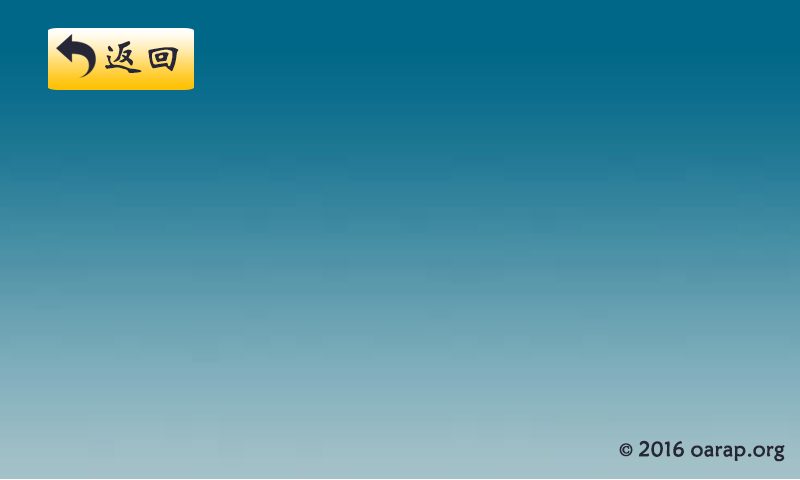
<style>
.page{position:relative;width:800px;height:480px}
.page>*{position:absolute;margin:0}
.t1{font:41.7px "STXinwei";color:#272636}
.t2{font:20.8px "STXinwei";color:#272636;font-weight:bold}
.t3{font:20.8px "AdobeSongStd-Light";color:#272636;font-weight:bold}
</style>
<div class="page">
<p class="t1" style="left:105px;top:41px;width:74px;height:32px">返回</p>
<p class="t2" style="left:619px;top:440px;width:166px;height:22px"><span class="t3">© </span>2016 oarap.org</p>
</div>
